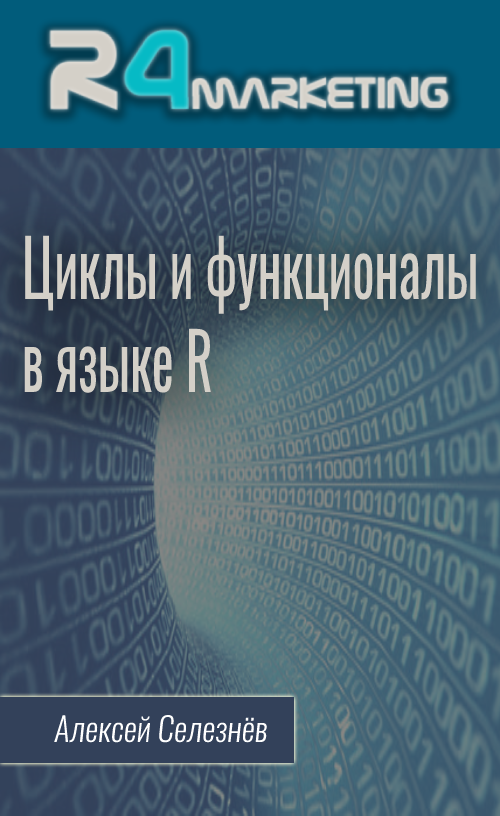
<style>
.page{position:relative;width:500px;height:816px}
.page>*{position:absolute;margin:0}
.t1{font:77.9px "Oswald-Regular";color:#d4d0c8;scale:0.67 1}
.t2{font:33px "Oswald-LightItalic";color:#ffffff}
</style>
<div class="page">
<p class="t1" style="left:24px;top:235px;width:452px;height:158px">Циклы и функционалы<br>в языке R</p>
<p class="t2" style="left:54px;top:714px;width:213px;height:29px">Алексей Селезнёв</p>
</div>
